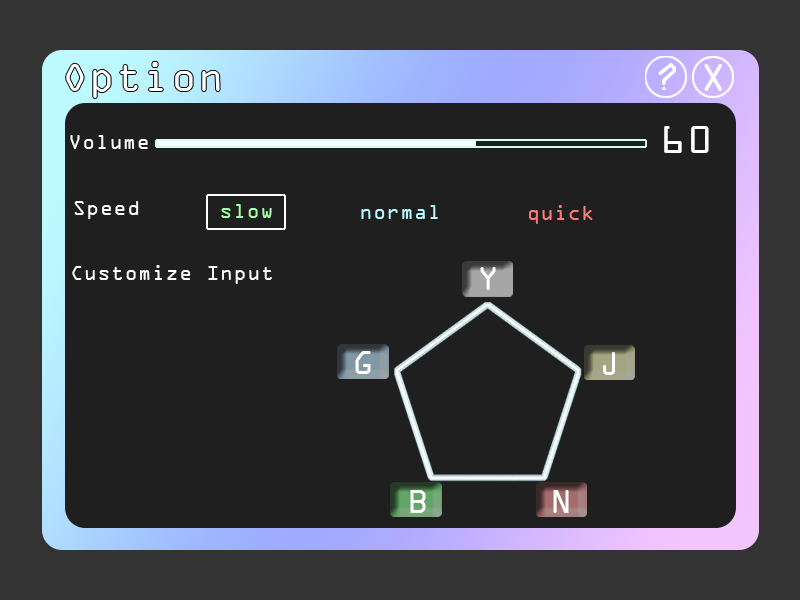
<style>
.page{position:relative;width:800px;height:600px;background:#1f1f1f}
.page>*{position:absolute;margin:0}
.t1{font:41.7px "OCRAExtended";letter-spacing:0.05em;color:#ffffff}
.t2{font:20.8px "OCRAExtended";letter-spacing:0.05em;color:#ffffff}
.t3{font:20.8px "OCRAExtended";letter-spacing:0.05em;color:#a3ffa9}
.t4{font:20.8px "OCRAExtended";letter-spacing:0.05em;color:#b6fbff}
.t5{font:20.8px "OCRAExtended";letter-spacing:0.05em;color:#fe7c7c}
.t6{font:35.6px "OCRAExtended";letter-spacing:0.05em;color:#ffffff}
</style>
<div class="page">
<p class="t1" style="left:664px;top:126px;width:45px;height:27px">60</p>
<p class="t2" style="left:70px;top:135px;width:78px;height:14px">Volume</p>
<p class="t2" style="left:74px;top:201px;width:65px;height:18px">Speed</p>
<p class="t3" style="left:221px;top:204px;width:51px;height:14px">slow</p>
<p class="t4" style="left:361px;top:205px;width:77px;height:14px">normal</p>
<p class="t5" style="left:529px;top:205px;width:64px;height:19px">quick</p>
<p class="t2" style="left:72px;top:265px;width:200px;height:19px">Customize Input</p>
<p class="t6" style="left:480px;top:267px;width:16px;height:23px">Y</p>
<p class="t6" style="left:355px;top:351px;width:16px;height:23px">G</p>
<p class="t6" style="left:603px;top:352px;width:12px;height:23px">J</p>
<p class="t6" style="left:410px;top:490px;width:16px;height:23px">B</p>
<p class="t6" style="left:553px;top:490px;width:16px;height:23px">N</p>
</div>
